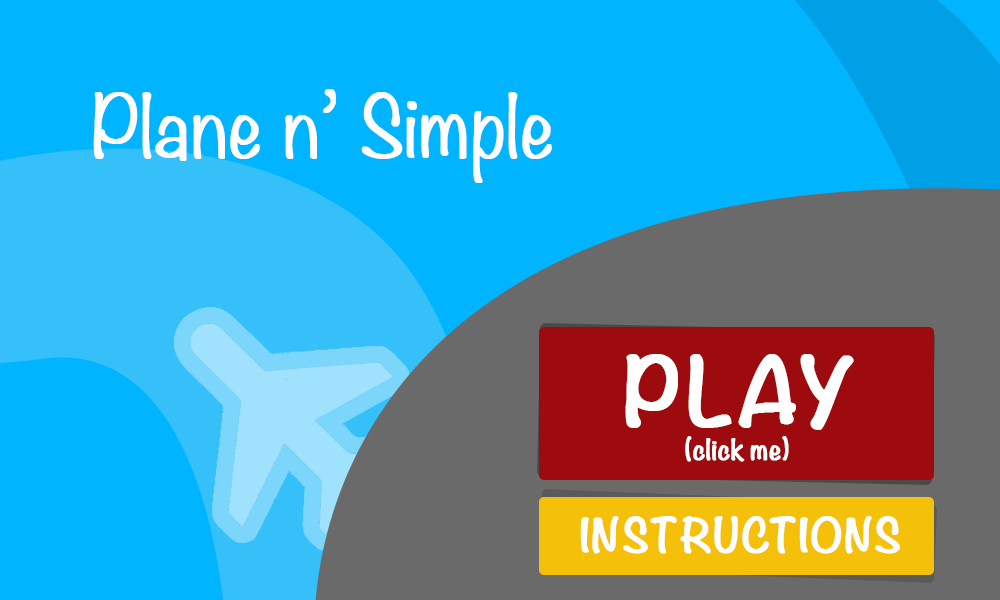
<style>
.page{position:relative;width:1000px;height:600px;background:#00b4ff}
.page>*{position:absolute;margin:0}
.t1{font:75px "Noteworthy-Light";color:#ffffff;font-weight:bold}
.t2{font:83.3px "Noteworthy-Bold";color:#ffffff;font-weight:bold}
.t3{font:25px "Noteworthy-Bold";color:#ffffff;font-weight:bold}
.t4{font:41.7px "Noteworthy-Bold";letter-spacing:0.01em;color:#ffffff;font-weight:bold}
</style>
<div class="page">
<p class="t1" style="left:93px;top:89px;width:459px;height:94px">Plane n’ Simple</p>
<p class="t2" style="left:625px;top:354px;width:229px;height:76px">PLAY</p>
<p class="t3" style="left:685px;top:436px;width:104px;height:26px">(click me)</p>
<p class="t4" style="left:580px;top:516px;width:320px;height:38px">INSTRUCTIONS</p>
</div>
